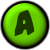
<style>
.page{position:relative;width:50px;height:50px}
.page>*{position:absolute;margin:0}
.t1{font:36px "#44Font"}
.t2{font:36px "#44Font";color:#1c3700}
</style>
<div class="page">
<p class="t1" style="left:13px;top:10px;width:22px;height:26px">B</p>
<p class="t2" style="left:14px;top:10px;width:21px;height:26px">A</p>
</div>
